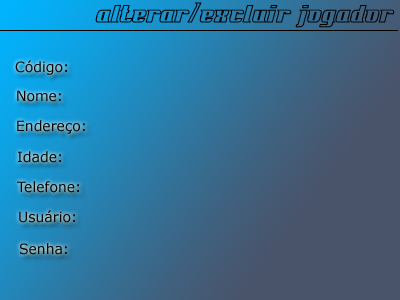
<style>
.page{position:relative;width:400px;height:300px}
.page>*{position:absolute;margin:0}
.t1{font:23.9px "FontovisionIVoutline";color:#000000}
.t2{font:13.9px "Verdana";color:#000000}
</style>
<div class="page">
<p class="t1" style="left:95px;top:2px;width:300px;height:26px">alterar/excluir Jogador</p>
<p class="t2" style="left:15px;top:60px;width:52px;height:15px">Código:</p>
<p class="t2" style="left:17px;top:90px;width:44px;height:12px">Nome:</p>
<p class="t2" style="left:17px;top:120px;width:68px;height:14px">Endereço:</p>
<p class="t2" style="left:18px;top:151px;width:43px;height:12px">Idade:</p>
<p class="t2" style="left:17px;top:181px;width:62px;height:12px">Telefone:</p>
<p class="t2" style="left:19px;top:210px;width:56px;height:13px">Usuário:</p>
<p class="t2" style="left:20px;top:243px;width:47px;height:12px">Senha:</p>
</div>
